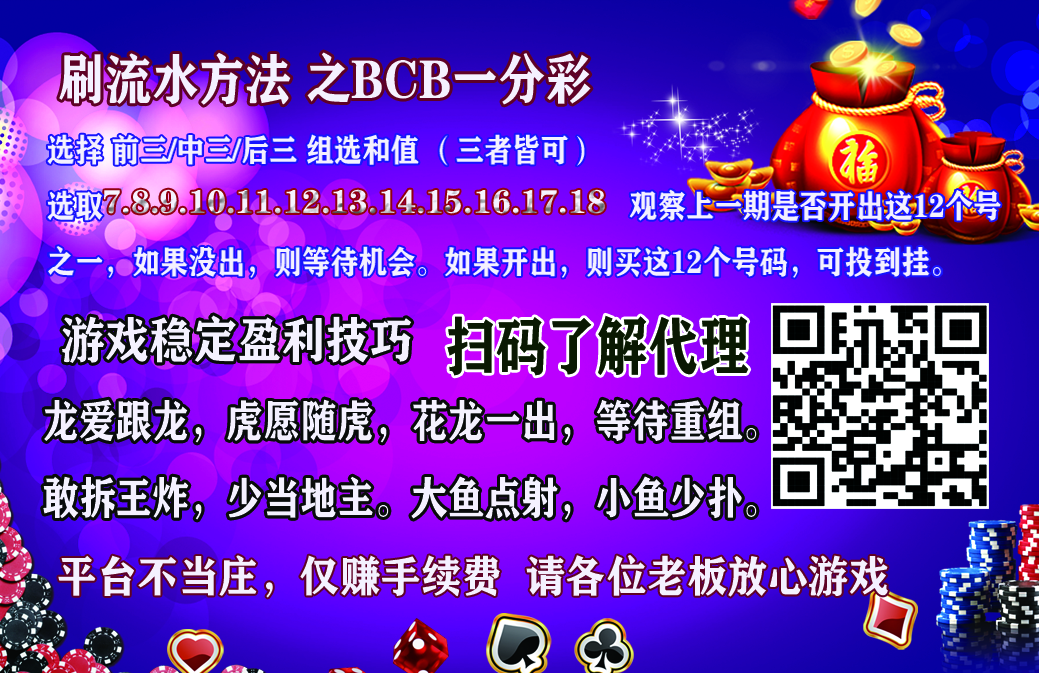
<style>
.page{position:relative;width:1039px;height:673px}
.page>*{position:absolute;margin:0}
.t1{font:54.5px "FZCHSJW--GB1-0";color:#f4f1ff;scale:0.86 1}
.t2{font:32.2px "FZCHSJW--GB1-0";color:#f4f1ff;scale:0.88 1}
.t3{font:40.2px "FZCHSJW--GB1-0";color:#f4f1ff;scale:0.88 1}
.t4{font:33.3px "FZCHSJW--GB1-0"}
.t5{font:49.4px "FZCHSJW--GB1-0";color:#f4f1ff;scale:0.89 1}
.t6{font:63.1px "FZCHSJW--GB1-0";color:#0a1902;scale:0.8 1}
.t7{font:44.3px "FZCHSJW--GB1-0";color:#f4f1ff;scale:0.83 1}
.t8{font:43.2px "FZCHSJW--GB1-0";color:#f4f1ff;scale:0.94 1}
</style>
<div class="page">
<p class="t1" style="left:59px;top:52px;width:532px;height:53px">刷流水方法 之BCB一分彩</p>
<p class="t2" style="left:47px;top:134px;width:954px;height:144px;text-align:center"><span class="t3"><br></span>选择 前三/中三/后三 组选和值 （三者皆可）<br>选取                                                                 观察上一期是否开出这12个号之一，如果没出，则等待机会。如果开出，则买这12个号码，可投到挂。<br>出。</p>
<p class="t4" style="left:104px;top:189px;width:501px;height:25px">7.8.9.10.11.12.13.14.15.16.17.18</p>
<p class="t5" style="left:62px;top:315px;width:350px;height:48px">游戏稳定盈利技巧</p>
<p class="t6" style="left:447px;top:315px;width:302px;height:61px">扫码了解代理</p>
<p class="t7" style="left:43px;top:399px;width:714px;height:121px">龙爱跟龙，虎愿随虎，花龙一出，等待重组。<br>敢拆王炸，少当地主。大鱼点射，小鱼少扑。</p>
<p class="t8" style="left:58px;top:555px;width:830px;height:43px">平台不当庄，仅赚手续费  请各位老板放心游戏</p>
</div>
